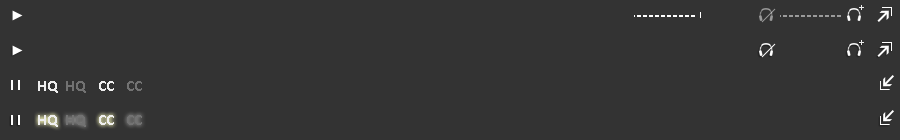
<style>
.page{position:relative;width:900px;height:140px;background:#333333}
.page>*{position:absolute;margin:0}
.t1{font:10px "Calibri-Light";color:#eeeeee}
.t2{font:16px "Calibri-Bold";color:#eeeeee}
.t3{font:16px "Calibri-Bold";color:#727272}
</style>
<div class="page">
<p class="t1" style="left:859px;top:5px;width:5px;height:5px">+</p>
<p class="t2" style="left:38px;top:81px;width:20px;height:12px">HQ</p>
<p class="t3" style="left:66px;top:81px;width:20px;height:12px">HQ</p>
<p class="t2" style="left:99px;top:81px;width:15px;height:10px">CC</p>
<p class="t3" style="left:127px;top:81px;width:15px;height:10px">CC</p>
<p class="t2" style="left:38px;top:115px;width:20px;height:12px">HQ</p>
<p class="t3" style="left:66px;top:115px;width:20px;height:12px">HQ</p>
<p class="t2" style="left:99px;top:115px;width:15px;height:10px">CC</p>
<p class="t3" style="left:127px;top:115px;width:15px;height:10px">CC</p>
</div>
